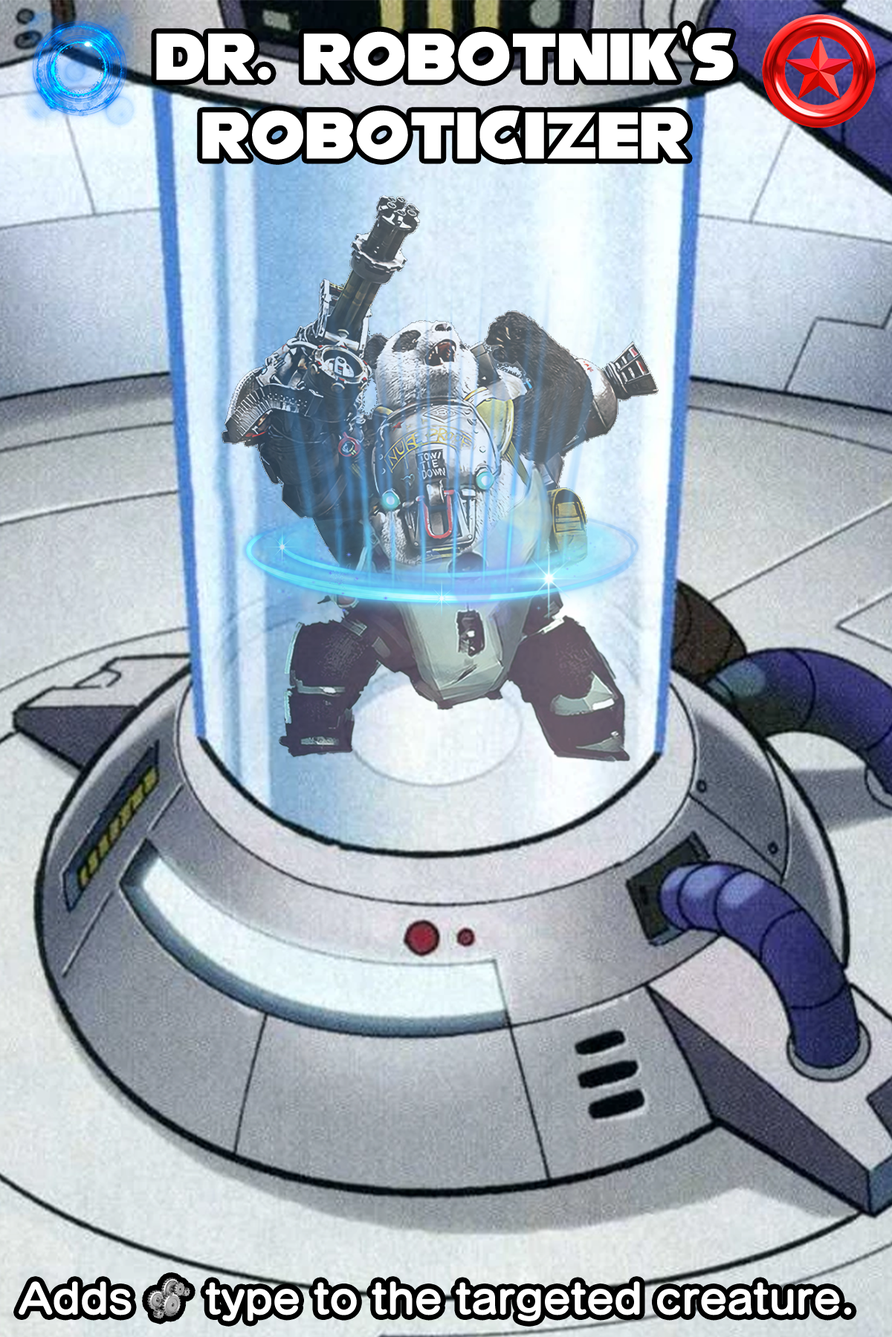
<style>
.page{position:relative;width:892px;height:1337px}
.page>*{position:absolute;margin:0}
.t1{font:101px/78.8px "NiseSegaSonic";color:#ffffff}
.t2{font:101px/78.8px "Elephant-Regular";color:#ffffff}
.t3{font:70.6px "SeuratPro-B";color:#ffffff}
.t4{font:70.6px "stoogedings-Regular";color:#ffffff}
</style>
<div class="page">
<p class="t1" style="left:156px;top:25px;width:577px;height:135px;text-align:center">Dr. Robotnik<span class="t2">'</span>s<br>Roboticizer</p>
<p class="t3" style="left:19px;top:1278px;width:832px;height:44px">Adds <span class="t4">[machine]</span> type to the targeted creature.</p>
</div>
